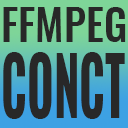
<style>
.page{position:relative;width:128px;height:128px;background:#282828}
.page>*{position:absolute;margin:0}
.t1{font:41.6px "Oswald-Medium";color:#282828}
.t2{font:79px "Oswald-Bold";color:#282828;scale:0.58 1}
</style>
<div class="page">
<p class="t1" style="left:3px;top:7px;width:123px;height:35px">FFMPEG</p>
<p class="t2" style="left:3px;top:52px;width:122px;height:67px">CONCT</p>
</div>
